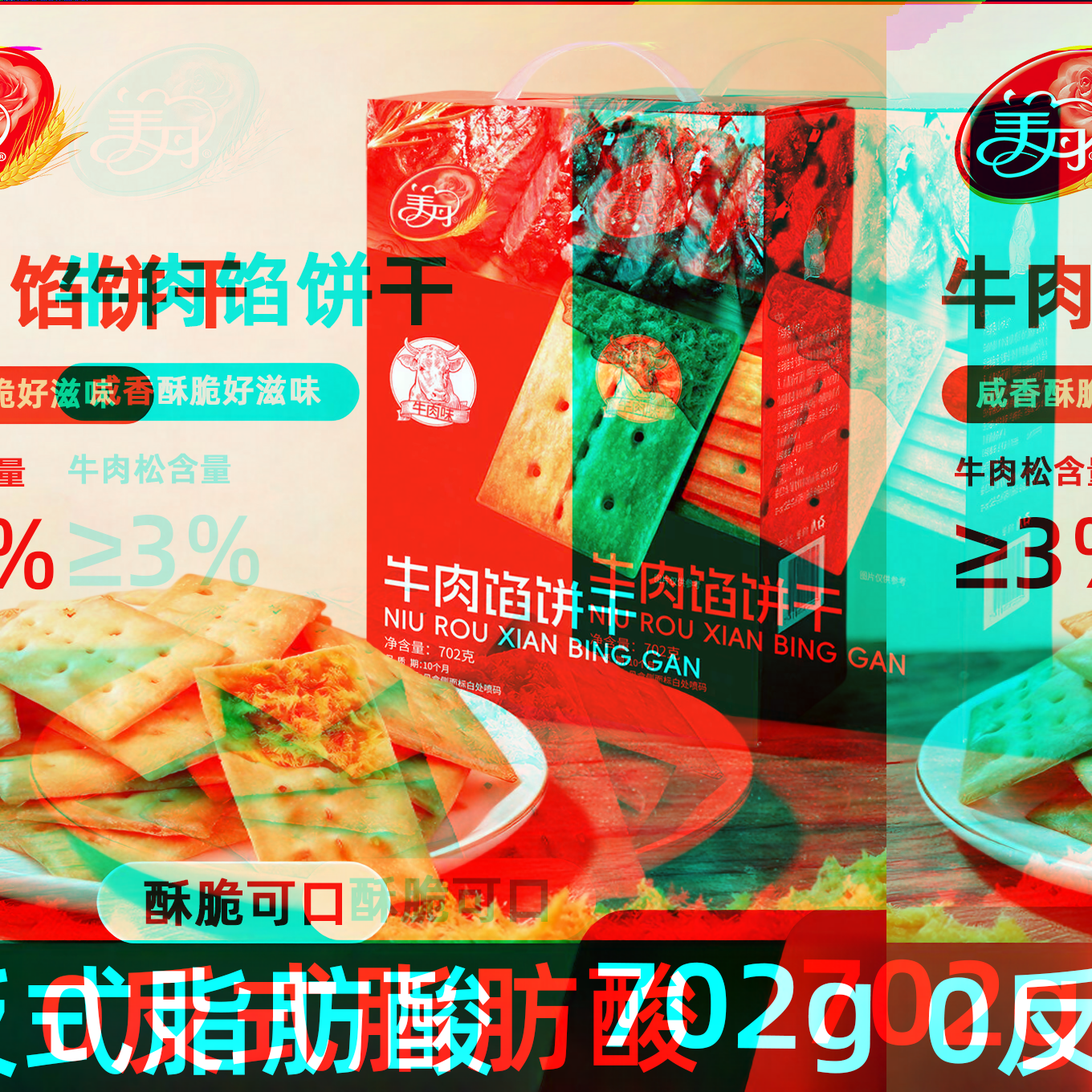
<style>
.page{position:relative;width:1092px;height:1092px}
.page>*{position:absolute;margin:0}
.t1{font:80.3px "AlibabaPuHuiTi-Medium";font-weight:bold}
.t2{font:32.8px "AlibabaPuHuiTi-Medium";font-weight:bold}
.t3{font:100.2px "AlibabaPuHuiTi-Medium";color:#b6e6d3}
.t4{font:51.5px "AlibabaPuHuiTi-Medium";font-weight:bold}
.t5{font:120.8px "AlibabaPuHuiTi-Medium"}
.t6{font:120.4px "AlibabaPuHuiTi-Medium"}
</style>
<div class="page">
<p class="t1" style="left:55px;top:250px;width:398px;height:77px">牛肉馅饼干</p>
<p class="t2" style="left:90px;top:373px;width:231px;height:32px">咸香酥脆好滋味</p>
<p class="t2" style="left:68px;top:451px;width:163px;height:32px">牛肉松含量</p>
<p class="t3" style="left:69px;top:513px;width:190px;height:72px">≥3%</p>
<p class="t4" style="left:349px;top:873px;width:199px;height:50px">酥脆可口</p>
<p class="t5" style="left:42px;top:960px;width:656px;height:113px">0反式脂肪酸</p>
<p class="t6" style="left:804px;top:957px;width:273px;height:112px;rotate:1deg">702g</p>
</div>
